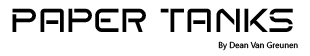
<style>
.page{position:relative;width:310px;height:56px;background:#ffffff}
.page>*{position:absolute;margin:0}
.t1{font:33.3px "Planet37Regular";color:#000000}
.t2{font:8.3px "SegoeUI";color:#000000}
</style>
<div class="page">
<p class="t1" style="left:12px;top:8px;width:281px;height:24px">Paper Tanks</p>
<p class="t2" style="left:218px;top:41px;width:80px;height:10px">By Dean Van Greunen</p>
</div>
